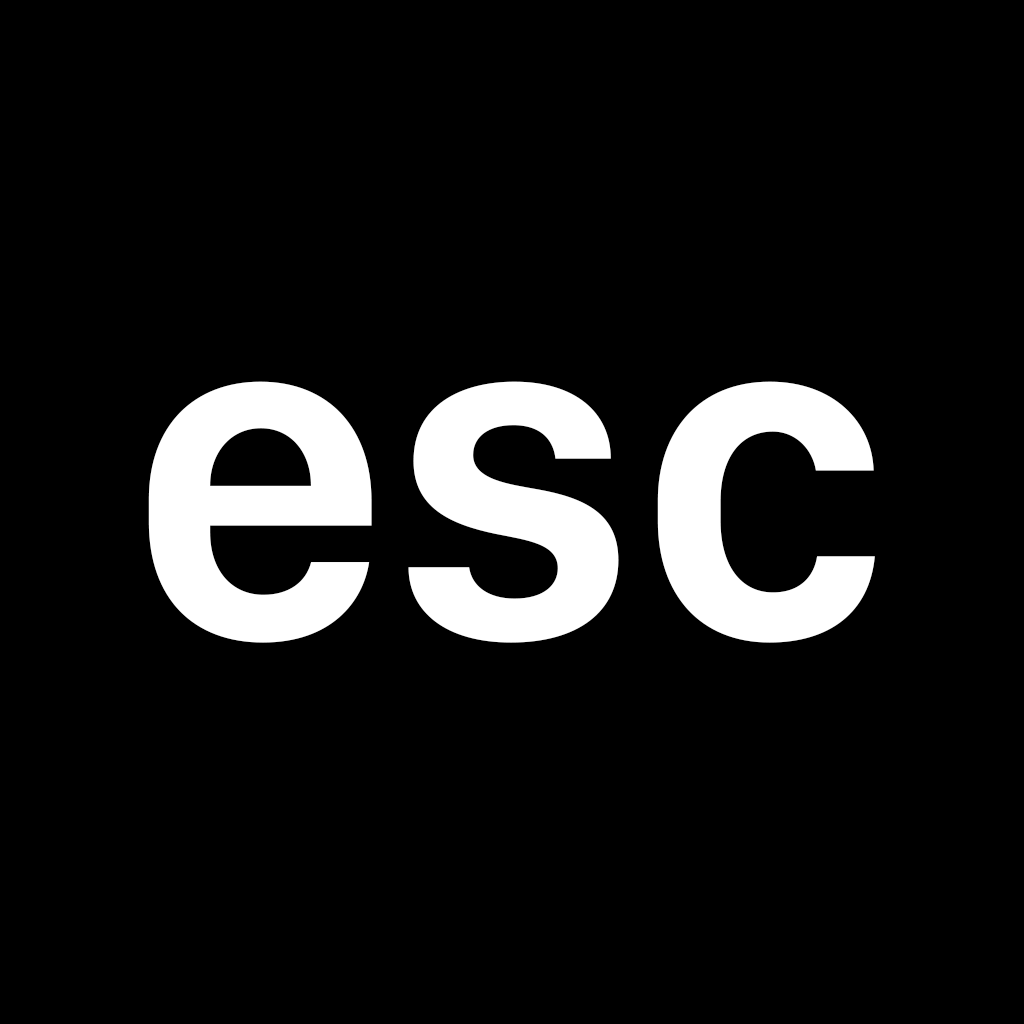
<style>
.page{position:relative;width:1024px;height:1024px;background:#000000}
.page>*{position:absolute;margin:0}
.t1{font:486px "SFCompactDisplay-Semibold";color:#ffffff}
</style>
<div class="page">
<p class="t1" style="left:148px;top:381px;width:727px;height:262px">esc</p>
</div>
